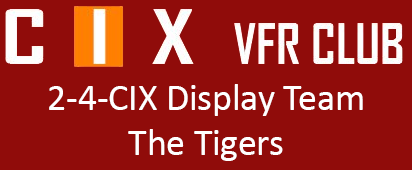
<style>
.page{position:relative;width:412px;height:170px;background:#900c0a}
.page>*{position:absolute;margin:0}
.t1{font:37.5px "Calibri";color:#ffffff}
</style>
<div class="page">
<p class="t1" style="left:49px;top:84px;width:314px;height:77px;text-align:center">2-4-CIX Display Team<br>The Tigers</p>
</div>
